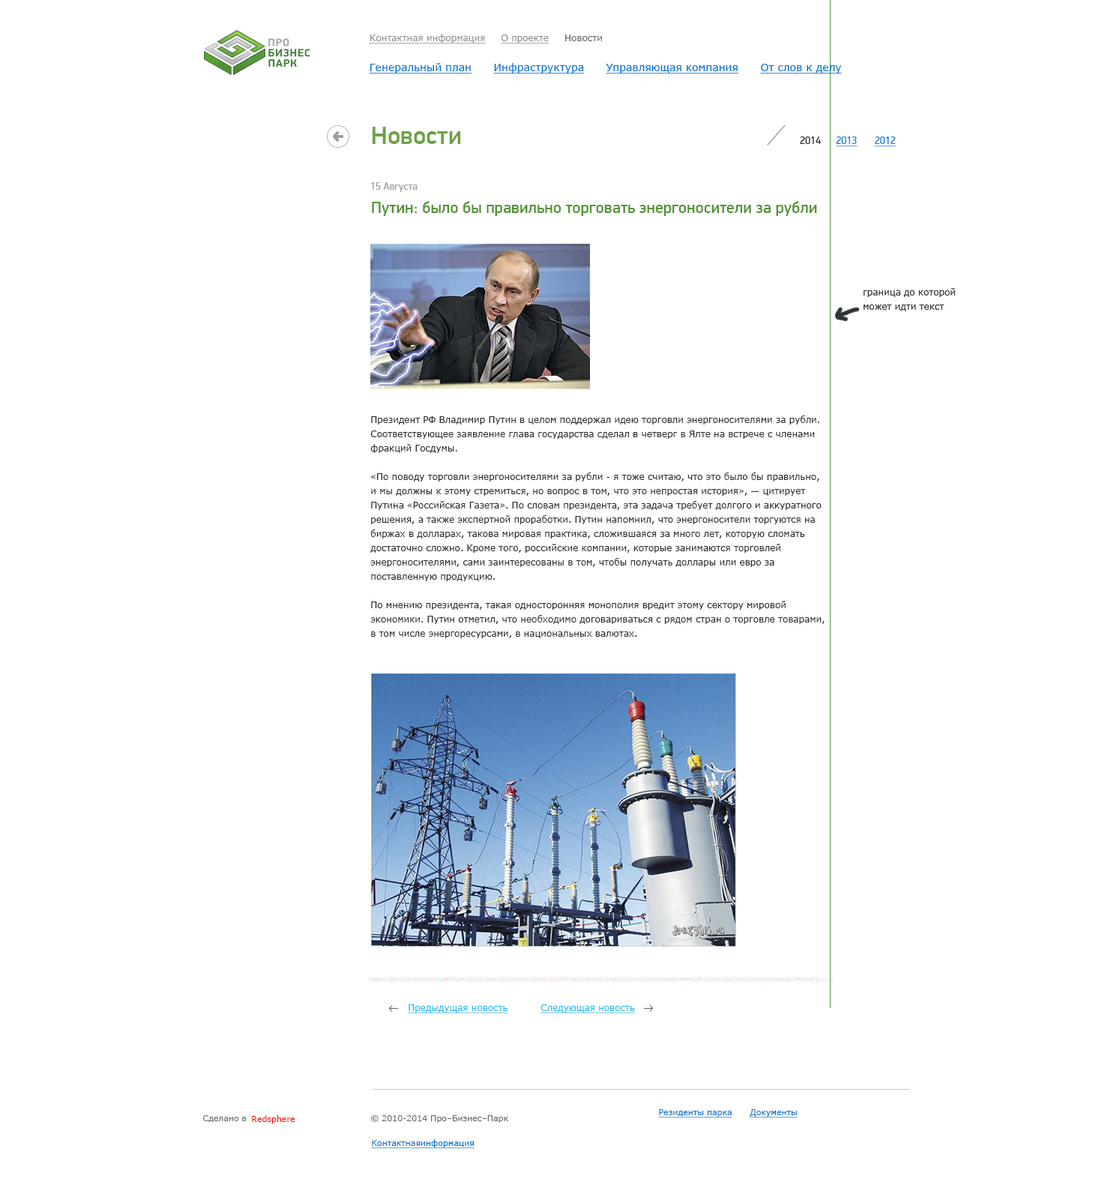
<style>
.page{position:relative;width:1099px;height:1194px;background:#ffffff}
.page>*{position:absolute;margin:0}
.t1{font:9px "Verdana";color:#8f8f8f;text-decoration:underline}
.t2{font:9px "Verdana";color:#666666}
.t3{font:10.5px "Verdana";color:#0074ce;text-decoration:underline}
.t4{font:10.5px "Verdana";color:#0074ce}
.t5{font:25.5px "PFDinDisplayPro-Medium";color:#6ea343}
.t6{font:10.5px "PFDinDisplayPro-Regular";color:#007dde;text-decoration:underline}
.t7{font:10.5px "PFDinDisplayPro-Regular";color:#202020}
.t8{font:10.5px "PFDinDisplayPro-Regular";color:#a1a1a1}
.t9{font:16.5px "PFDinDisplayPro-Medium";color:#549437}
.t10{font:9px/14.2px "Verdana";color:#2b2b2b}
.t11{font:9px "Verdana";color:#26b8ee;text-decoration:underline}
.t12{font:8.2px "Verdana";color:#0074ce;text-decoration:underline}
.t13{font:8.2px "Verdana";color:#717171}
.t14{font:8.2px "Verdana";color:#fa1010}
.t15{font:8.2px "Verdana";color:#888888}
.t16{font:8.2px "Verdana";color:#666666}
</style>
<div class="page">
<p class="t1" style="left:370px;top:34px;width:232px;height:9px">Контактная информация     О проекте     <span class="t2">Новости</span></p>
<p class="t3" style="left:369px;top:63px;width:473px;height:11px"><span class="t4">      </span>Генеральный план      Инфраструктура      Управляющая компания      От слов к делу</p>
<p class="t5" style="left:372px;top:127px;width:89px;height:17px">Новости</p>
<p class="t6" style="left:800px;top:136px;width:96px;height:11px"><span class="t7">2014      </span>2013       2012</p>
<p class="t8" style="left:371px;top:182px;width:47px;height:10px">15 Августа</p>
<p class="t9" style="left:372px;top:201px;width:445px;height:15px">Путин: было бы правильно торговать энергоносители за рубли</p>
<p class="t10" style="left:370px;top:415px;width:455px;height:223px">Президент РФ Владимир Путин в целом поддержал идею торговли энергоносителями за рубли. <br>Соответствующее заявление глава государства сделал в четверг в Ялте на встрече с членами <br>фракций Госдумы. <br><br>«По поводу торговли энергоносителями за рубли - я тоже считаю, что это было бы правильно, <br>и мы должны к этому стремиться, но вопрос в том, что это непростая история», — цитирует <br>Путина «Российская Газета». По словам президента, эта задача требует долгого и аккуратного <br>решения, а также экспертной проработки. Путин напомнил, что энергоносители торгуются на <br>биржах в долларах, такова мировая практика, сложившаяся за много лет, которую сломать <br>достаточно сложно. Кроме того, российские компании, которые занимаются торговлей <br>энергоносителями, сами заинтересованы в том, чтобы получать доллары или евро за <br>поставленную продукцию. <br><br>По мнению президента, такая односторонняя монополия вредит этому сектору мировой <br>экономики. Путин отметил, что необходимо договариваться с рядом стран о торговле товарами, <br>в том числе энергоресурсами, в национальных валютах.</p>
<p class="t11" style="left:408px;top:1004px;width:100px;height:9px">Предыдущая новость</p>
<p class="t11" style="left:541px;top:1004px;width:94px;height:9px">Следующая новость</p>
<p class="t12" style="left:658px;top:1109px;width:75px;height:8px">Резиденты парка</p>
<p class="t12" style="left:750px;top:1109px;width:48px;height:8px">Документы</p>
<p class="t13" style="left:203px;top:1115px;width:44px;height:7px">Сделано в</p>
<p class="t14" style="left:252px;top:1115px;width:43px;height:8px"><span class="t15">         </span>Redsphere</p>
<p class="t16" style="left:371px;top:1114px;width:137px;height:9px">© 2010-2014 Про–Бизнес–Парк</p>
<p class="t12" style="left:371px;top:1139px;width:104px;height:9px">Контактнаяинформация</p>
</div>
